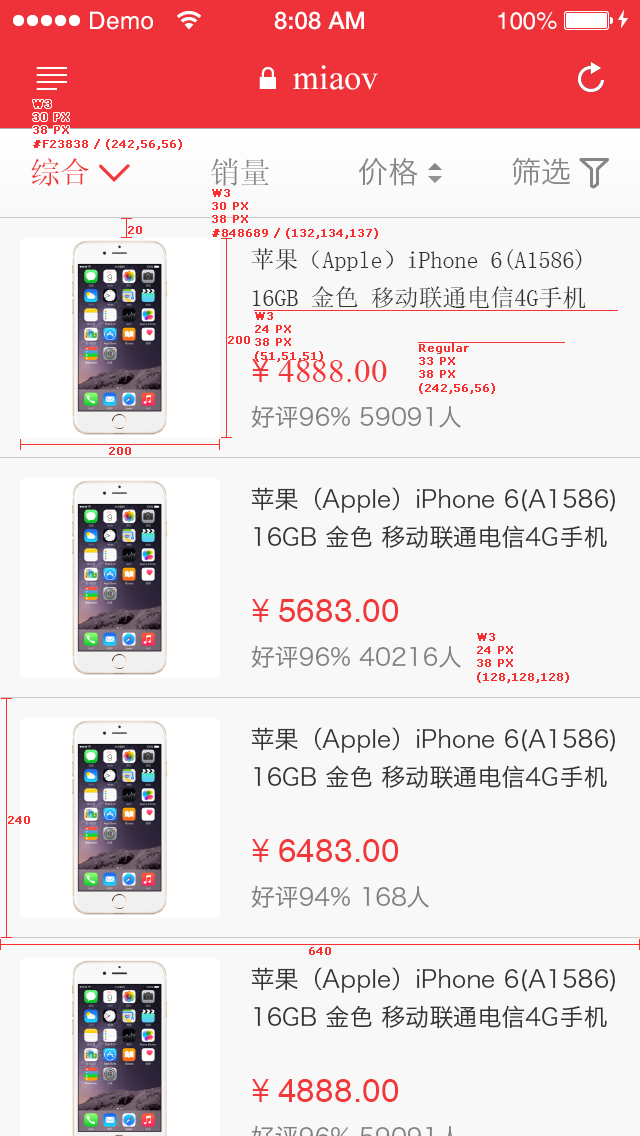
<style>
.page{position:relative;width:640px;height:1136px;background:#f8f8f8}
.page>*{position:absolute;margin:0}
.t1{font:24px "Helvetica";letter-spacing:0.028em;color:#ffffff}
.t2{font:24px "HelveticaNeueLTPro-Md";letter-spacing:0.006em;color:#ffffff}
.t3{font:24px "Helvetica";color:#ffffff}
.t4{font:34px "TimesNewRomanPSMT";letter-spacing:0.005em;color:#ffffff}
.t5{font:30px "SimSun";color:#f23838}
.t6{font:30px "SimSun";color:#848689}
.t7{font:30px "HiraginoSansGB-W3";color:#848689}
.t8{font:11px "Verdana";color:#f83030;font-weight:bold}
.t9{font:24px/38px "SimSun";color:#333333}
.t10{font:33px "TimesNewRomanPSMT";letter-spacing:0.012em;color:#f23838}
.t11{font:33px "STXihei";letter-spacing:0.012em;color:#f23838}
.t12{font:24px "HiraginoSansGB-W3";color:#808080}
.t13{font:24px/38px "HiraginoSansGB-W3";color:#333333}
.t14{font:33px "Helvetica";letter-spacing:0.012em;color:#f23838}
</style>
<div class="page">
<p class="t1" style="left:90px;top:11px;width:63px;height:19px">Demo</p>
<p class="t2" style="left:274px;top:11px;width:90px;height:19px">8:08 AM</p>
<p class="t3" style="left:498px;top:12px;width:59px;height:18px">100%</p>
<p class="t4" style="left:293px;top:65px;width:85px;height:25px">miaov</p>
<p class="t5" style="left:31px;top:158px;width:58px;height:28px">综合</p>
<p class="t6" style="left:211px;top:158px;width:58px;height:28px">销量</p>
<p class="t7" style="left:358px;top:157px;width:60px;height:29px">价格</p>
<p class="t7" style="left:512px;top:157px;width:59px;height:29px">筛选</p>
<p class="t8" style="left:212px;top:189px;width:166px;height:50px">W3<br>30 PX<br>38 PX<br>#848689 / (132,134,137)</p>
<p class="t8" style="left:128px;top:226px;width:14px;height:8px">20</p>
<p class="t9" style="left:251px;top:248px;width:335px;height:61px">苹果（Apple）iPhone 6(A1586) 16GB 金色 移动联通电信4G手机</p>
<p class="t8" style="left:255px;top:312px;width:68px;height:50px">W3<br>24 PX<br>38 PX<br>(51,51,51)</p>
<p class="t8" style="left:228px;top:336px;width:22px;height:8px">200</p>
<p class="t8" style="left:419px;top:343px;width:76px;height:51px">Regular<br>33 PX<br>38 PX<br>(242,56,56)</p>
<p class="t10" style="left:252px;top:359px;width:135px;height:23px"><span class="t11">￥</span>4888.00</p>
<p class="t12" style="left:251px;top:405px;width:210px;height:23px">好评96% 59091人</p>
<p class="t8" style="left:109px;top:447px;width:22px;height:8px">200</p>
<p class="t13" style="left:251px;top:487px;width:364px;height:62px">苹果（Apple）iPhone 6(A1586) 16GB 金色 移动联通电信4G手机</p>
<p class="t14" style="left:252px;top:599px;width:147px;height:23px"><span class="t11">￥</span>5683.00</p>
<p class="t8" style="left:477px;top:633px;width:92px;height:50px">W3<br>24 PX<br>38 PX<br>(128,128,128)</p>
<p class="t12" style="left:251px;top:645px;width:210px;height:23px">好评96% 40216人</p>
<p class="t13" style="left:251px;top:727px;width:364px;height:62px">苹果（Apple）iPhone 6(A1586) 16GB 金色 移动联通电信4G手机</p>
<p class="t8" style="left:8px;top:816px;width:22px;height:8px">240</p>
<p class="t14" style="left:252px;top:839px;width:147px;height:23px"><span class="t11">￥</span>6483.00</p>
<p class="t12" style="left:251px;top:885px;width:178px;height:23px">好评94% 168人</p>
<p class="t8" style="left:309px;top:947px;width:22px;height:8px">640</p>
<p class="t13" style="left:251px;top:967px;width:364px;height:62px">苹果（Apple）iPhone 6(A1586) 16GB 金色 移动联通电信4G手机</p>
<p class="t14" style="left:252px;top:1079px;width:147px;height:23px"><span class="t11">￥</span>4888.00</p>
</div>
